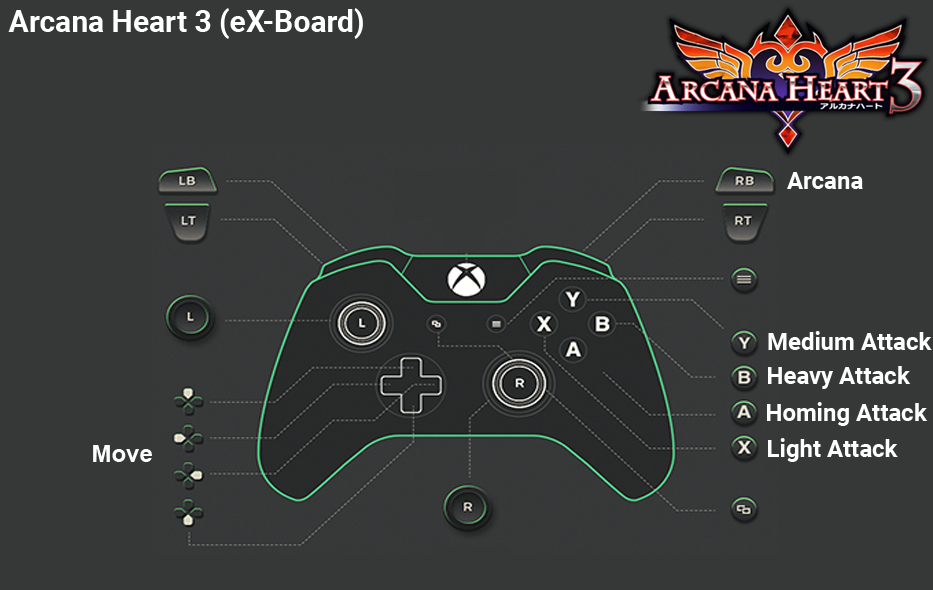
<style>
.page{position:relative;width:933px;height:590px;background:#363838}
.page>*{position:absolute;margin:0}
.t1{font:30px "Roboto-Bold";color:#ffffff}
.t2{font:24px "Roboto-Bold";color:#ffffff}
.t3{font:24px "Arial-BoldMT";color:#fefefe}
</style>
<div class="page">
<p class="t1" style="left:8px;top:8px;width:355px;height:31px">Arcana Heart 3 (eX-Board)</p>
<p class="t2" style="left:787px;top:172px;width:76px;height:17px">Arcana</p>
<p class="t2" style="left:768px;top:331px;width:164px;height:19px">Medium Attack</p>
<p class="t2" style="left:768px;top:366px;width:143px;height:23px">Heavy Attack</p>
<p class="t2" style="left:767px;top:402px;width:161px;height:24px">Homing Attack</p>
<p class="t2" style="left:768px;top:438px;width:130px;height:24px">Light Attack</p>
<p class="t3" style="left:93px;top:445px;width:59px;height:17px">Move</p>
</div>
